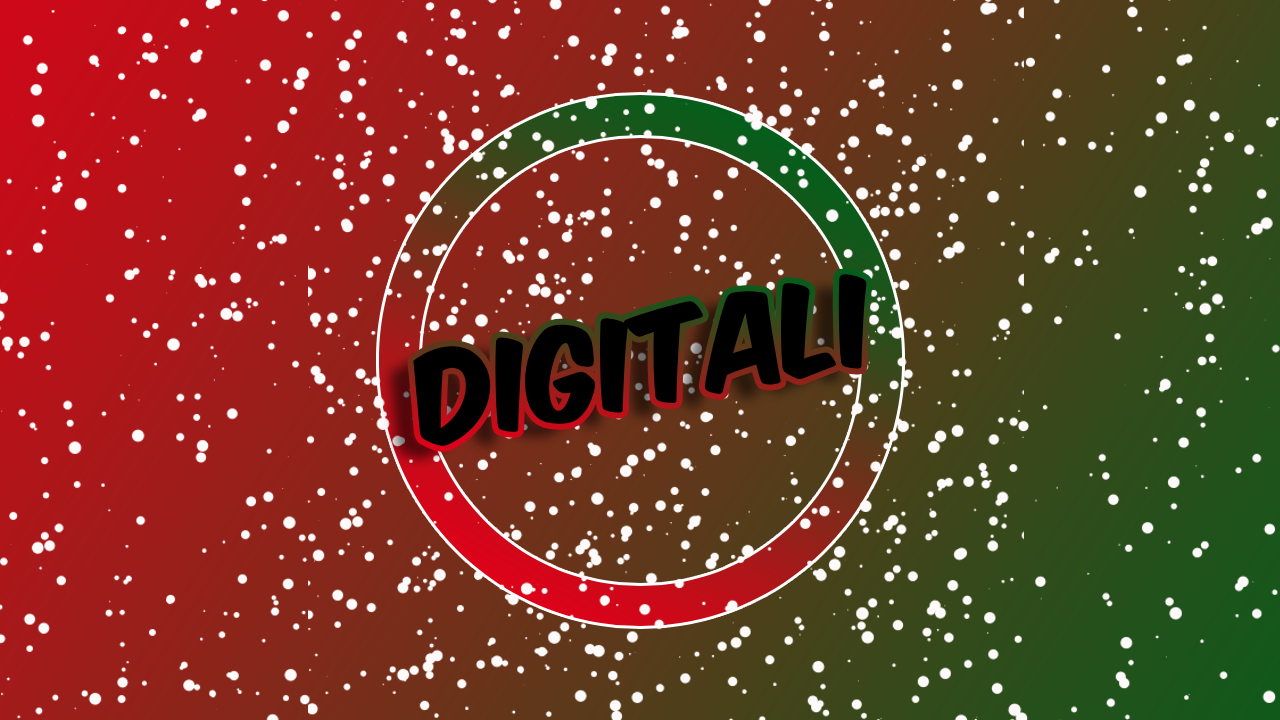
<style>
.page{position:relative;width:1280px;height:720px}
.page>*{position:absolute;margin:0}
.t1{font:109.1px "KomikaAxis";color:#000000}
</style>
<div class="page">
<p class="t1" style="left:413px;top:274px;width:454px;height:172px;rotate:-10deg">Digitali</p>
</div>
